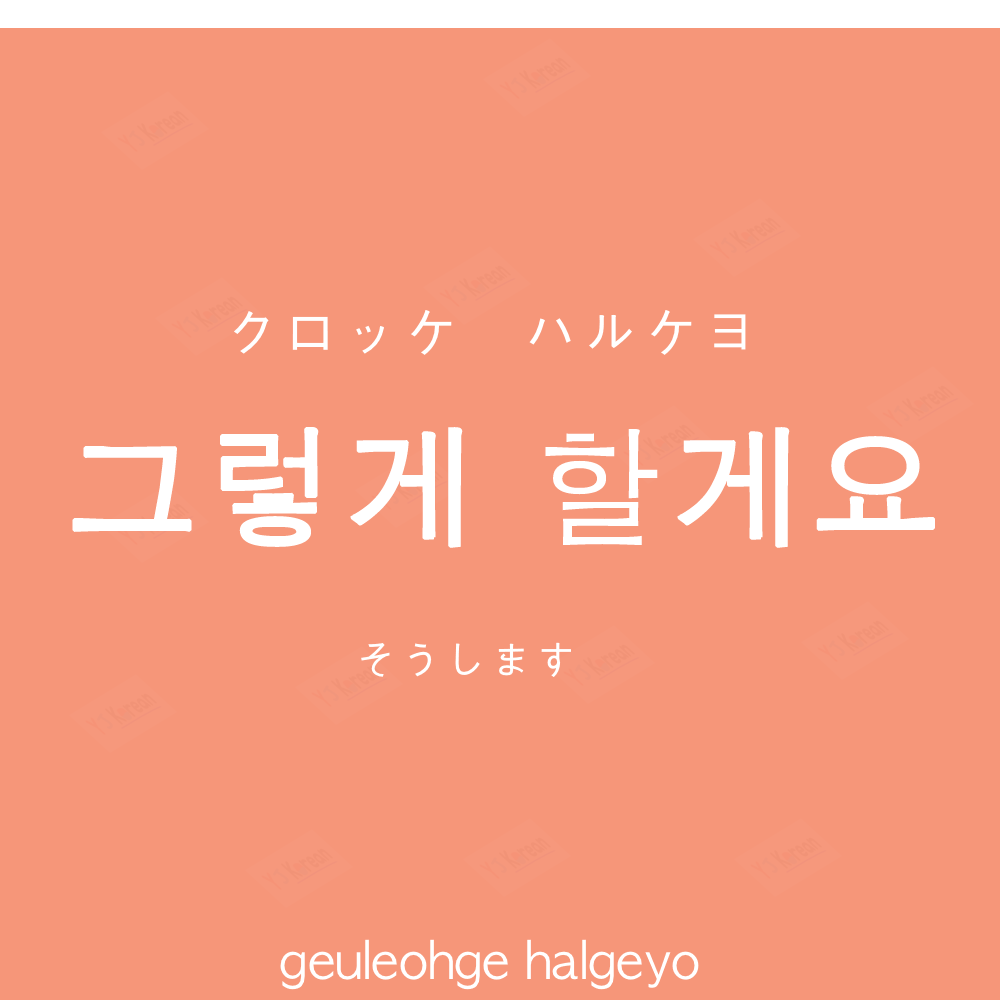
<style>
.page{position:relative;width:1000px;height:1000px;background:#f69679}
.page>*{position:absolute;margin:0}
.t1{font:60px "AppleGothic";color:#ffffff}
.t2{font:130px "AppleGothic";letter-spacing:0.04em;color:#ffffff;font-weight:bold}
.t3{font:45px "AppleGothic";color:#ffffff}
.t4{font:50px "AppleGothic";color:#ffffff}
</style>
<div class="page">
<p class="t1" style="left:234px;top:310px;width:512px;height:45px">クロッケ　ハルケヨ</p>
<p class="t2" style="left:72px;top:427px;width:863px;height:121px">그렇게 할게요</p>
<p class="t3" style="left:361px;top:642px;width:210px;height:35px">そうします</p>
<p class="t4" style="left:280px;top:939px;width:419px;height:51px">geuleohge halgeyo</p>
</div>
